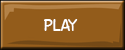
<style>
.page{position:relative;width:125px;height:50px;background:#935c1b}
.page>*{position:absolute;margin:0}
.t1{font:15px "Chinacat";letter-spacing:0.01em;color:#ffffff;text-transform:uppercase}
</style>
<div class="page">
<p class="t1" style="left:44px;top:19px;width:34px;height:12px">play</p>
</div>
